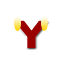
<style>
.page{position:relative;width:64px;height:64px;background:#ffffff}
.page>*{position:absolute;margin:0}
.t1{font:36px "Arial-BoldMT";color:#9b0000;font-weight:bold;scale:1.3 1}
</style>
<div class="page">
<p class="t1" style="left:15px;top:20px;width:33px;height:28px">Y</p>
</div>
